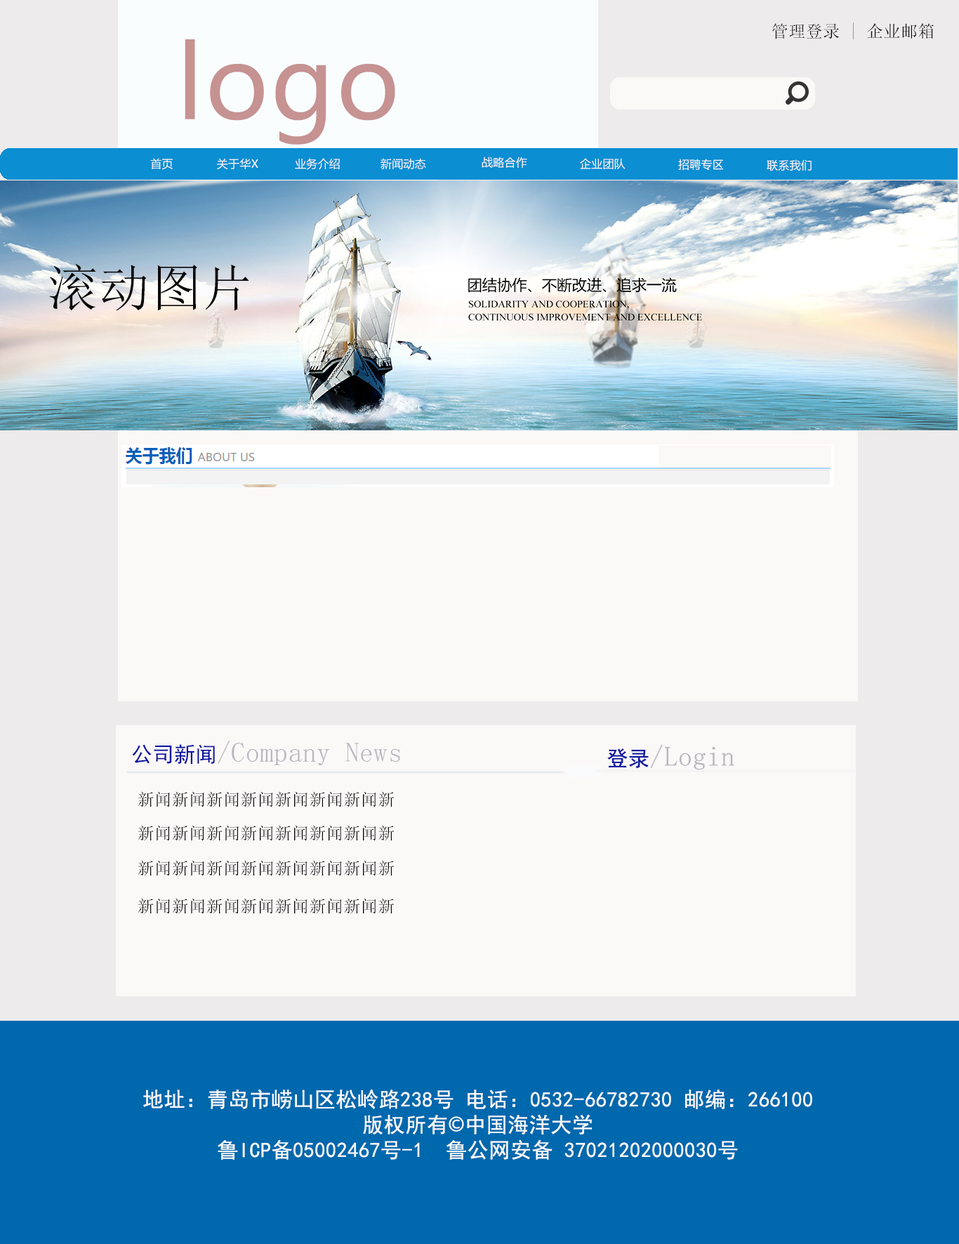
<style>
.page{position:relative;width:959px;height:1244px;background:#fbf8f8}
.page>*{position:absolute;margin:0}
.t1{font:16.8px "SimSun";letter-spacing:0.02em;color:#090808}
.t2{font:99.7px "MicrosoftYaHei";letter-spacing:0.02em;color:#c69292}
.t3{font:11.2px "MicrosoftYaHei";letter-spacing:0.02em;color:#f9f3f3}
.t4{font:11.2px "MicrosoftYaHei";letter-spacing:0.02em;color:#faf5f5}
.t5{font:50.5px "SimSun";letter-spacing:0.02em;color:#090808}
.t6{font:27.4px "SimSun";letter-spacing:0.02em;color:#b7b7be}
.t7{font:21.1px "SimHei";letter-spacing:0.02em;color:#0812a0}
.t8{font:21.1px "SimHei";letter-spacing:0.02em;color:#121ca2}
.t9{font:16.8px "SimSun";letter-spacing:0.02em;color:#050505}
.t10{font:21.1px/12.6px "SimHei";letter-spacing:0.02em;color:#fafafc}
.t11{font:21.1px/12.6px "AdobeHeitiStd-Regular";letter-spacing:0.02em;color:#fafafc}
</style>
<div class="page">
<p class="t1" style="left:772px;top:22px;width:161px;height:18px">管理登录 | 企业邮箱</p>
<p class="t2" style="left:185px;top:39px;width:210px;height:106px">logo</p>
<p class="t3" style="left:150px;top:158px;width:23px;height:12px">首页</p>
<p class="t4" style="left:217px;top:158px;width:41px;height:12px">关于华X</p>
<p class="t4" style="left:295px;top:158px;width:45px;height:12px">业务介绍</p>
<p class="t4" style="left:380px;top:158px;width:46px;height:12px">新闻动态</p>
<p class="t4" style="left:481px;top:157px;width:46px;height:11px">战略合作</p>
<p class="t4" style="left:580px;top:158px;width:45px;height:11px">企业团队</p>
<p class="t4" style="left:678px;top:159px;width:45px;height:12px">招聘专区</p>
<p class="t4" style="left:766px;top:159px;width:45px;height:12px">联系我们</p>
<p class="t5" style="left:49px;top:263px;width:200px;height:48px">滚动图片</p>
<p class="t6" style="left:132px;top:740px;width:268px;height:25px"><span class="t7">公司新闻</span>/Company News</p>
<p class="t6" style="left:607px;top:744px;width:127px;height:26px"><span class="t8">登录</span>/Login</p>
<p class="t9" style="left:138px;top:791px;width:256px;height:16px">新闻新闻新闻新闻新闻新闻新闻新闻新闻新闻新闻</p>
<p class="t9" style="left:138px;top:825px;width:256px;height:16px">新闻新闻新闻新闻新闻新闻新闻新闻新闻新闻新闻</p>
<p class="t9" style="left:138px;top:860px;width:256px;height:16px">新闻新闻新闻新闻新闻新闻新闻新闻新闻新闻新闻</p>
<p class="t9" style="left:138px;top:898px;width:256px;height:16px">新闻新闻新闻新闻新闻新闻新闻新闻新闻新闻新闻</p>
<p class="t10" style="left:143px;top:1089px;width:669px;height:70px;text-align:center">地址：青岛市崂山区松岭路238号 电话：0532-66782730 邮编：266100 <br><br>版权所有<span class="t11">©</span>中国海洋大学 <br><br>鲁ICP备05002467号-1  鲁公网安备 37021202000030号</p>
</div>
